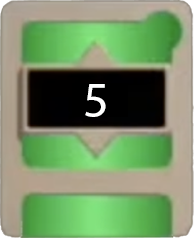
<style>
.page{position:relative;width:194px;height:238px}
.page>*{position:absolute;margin:0}
.t1{font:50px "MyriadPro-Regular";color:#ffffff}
</style>
<div class="page">
<p class="t1" style="left:85px;top:84px;width:21px;height:33px">5</p>
</div>
